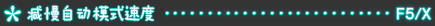
<style>
.page{position:relative;width:435px;height:26px;background:#333333}
.page>*{position:absolute;margin:0}
.t1{font:18px "¢è?";color:#ffffff}
</style>
<div class="page">
<p class="t1" style="left:27px;top:5px;width:127px;height:16px">减慢自动模式速度</p>
</div>
